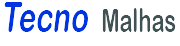
<style>
.page{position:relative;width:180px;height:46px;background:#ffffff}
.page>*{position:absolute;margin:0}
.t1{font:33.3px "ArialRoundedMTBold";color:#060808;scale:0.65 1}
.t2{font:41.7px "ArialRoundedMTBold";color:#0033df;font-style:italic;scale:0.7 1}
</style>
<div class="page">
<p class="t1" style="left:4px;top:2px;width:172px;height:30px"><span class="t2">Tecno  </span>Malhas</p>
</div>
